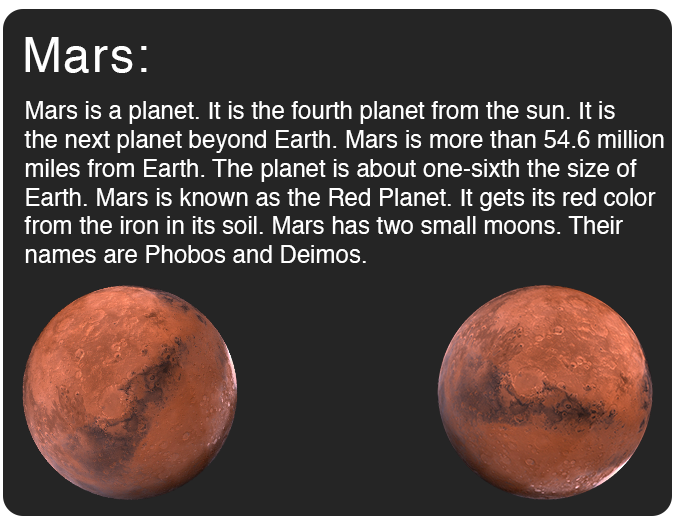
<style>
.page{position:relative;width:675px;height:525px;background:#252525}
.page>*{position:absolute;margin:0}
.t1{font:48px "Helvetica";letter-spacing:0.04em;color:#ffffff}
.t2{font:24px "Helvetica";color:#ffffff}
</style>
<div class="page">
<p class="t1" style="left:25px;top:37px;width:122px;height:36px">Mars:</p>
<p class="t2" style="left:24px;top:101px;width:640px;height:162px">Mars is a planet. It is the fourth planet from the sun. It is <br>the next planet beyond Earth. Mars is more than 54.6 million <br>miles from Earth. The planet is about one-sixth the size of<br>Earth. Mars is known as the Red Planet. It gets its red color <br>from the iron in its soil. Mars has two small moons. Their <br>names are Phobos and Deimos.</p>
</div>
